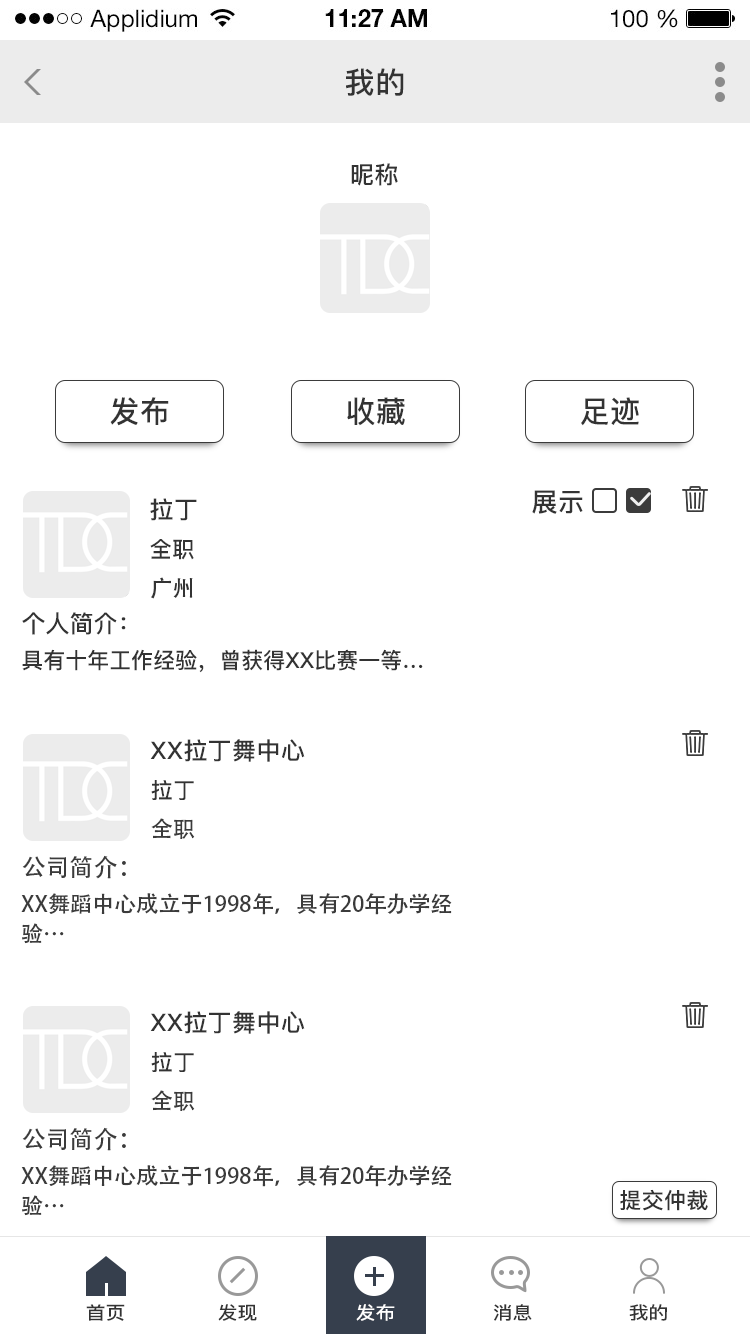
<style>
.page{position:relative;width:750px;height:1334px;background:#ffffff}
.page>*{position:absolute;margin:0}
.t1{font:30px "PingFang-SC-Bold";letter-spacing:0.02em;color:#333333;text-transform:uppercase}
.t2{font:24px "PingFang-SC-Bold";letter-spacing:0.02em;color:#333333;text-transform:uppercase}
.t3{font:26px "PingFang-SC-Bold";letter-spacing:0.02em;color:#333333;text-transform:uppercase}
.t4{font:22px "PingFang-SC-Bold";letter-spacing:0.02em;color:#333333;text-transform:uppercase}
.t5{font:22px "AdobeHeitiStd-Regular";letter-spacing:0.02em;color:#333333;text-transform:uppercase}
.t6{font:24px "PingFang-SC-Bold";color:#333333;text-transform:uppercase}
.t7{font:22px "PingFang-SC-Bold";color:#333333;text-transform:uppercase}
.t8{font:22px "AdobeHeitiStd-Regular";letter-spacing:0.02em;color:#3b3b3b;text-transform:uppercase}
.t9{font:24px "AdobeHeitiStd-Regular";color:#3b3b3b;text-transform:uppercase}
.t10{font:22px/29.7px "AdobeHeitiStd-Regular";color:#3b3b3b;text-transform:uppercase}
.t11{font:18px "PingFang-SC-Bold";color:#333333;scale:1.1 1}
.t12{font:18px "PingFang-SC-Bold";color:#ffffff;scale:1.1 1}
</style>
<div class="page">
<p class="t1" style="left:346px;top:68px;width:58px;height:28px">我的</p>
<p class="t2" style="left:351px;top:163px;width:47px;height:23px">昵称</p>
<p class="t1" style="left:110px;top:397px;width:59px;height:29px">发布</p>
<p class="t1" style="left:347px;top:397px;width:58px;height:29px">收藏</p>
<p class="t1" style="left:581px;top:397px;width:58px;height:29px">足迹</p>
<p class="t3" style="left:532px;top:490px;width:51px;height:24px">展示</p>
<p class="t2" style="left:150px;top:498px;width:47px;height:23px">拉丁</p>
<p class="t4" style="left:150px;top:539px;width:44px;height:21px">全职</p>
<p class="t5" style="left:151px;top:577px;width:42px;height:22px">广州</p>
<p class="t6" style="left:22px;top:612px;width:104px;height:23px">个人简介：</p>
<p class="t7" style="left:22px;top:649px;width:401px;height:24px">具有十年工作经验，曾获得xx比赛一等…</p>
<p class="t2" style="left:150px;top:739px;width:155px;height:23px">xx拉丁舞中心</p>
<p class="t4" style="left:151px;top:780px;width:43px;height:20px">拉丁</p>
<p class="t8" style="left:151px;top:818px;width:44px;height:21px">全职</p>
<p class="t9" style="left:22px;top:855px;width:104px;height:24px">公司简介：</p>
<p class="t10" style="left:21px;top:893px;width:431px;height:51px">xx舞蹈中心成立于1998年，具有20年办学经<br>验…</p>
<p class="t2" style="left:150px;top:1011px;width:155px;height:23px">xx拉丁舞中心</p>
<p class="t4" style="left:151px;top:1052px;width:43px;height:20px">拉丁</p>
<p class="t8" style="left:151px;top:1090px;width:44px;height:21px">全职</p>
<p class="t9" style="left:22px;top:1127px;width:104px;height:24px">公司简介：</p>
<p class="t10" style="left:21px;top:1165px;width:431px;height:51px">xx舞蹈中心成立于1998年，具有20年办学经<br>验…</p>
<p class="t4" style="left:620px;top:1189px;width:88px;height:22px">提交仲裁</p>
<p class="t11" style="left:86px;top:1304px;width:39px;height:17px">首页</p>
<p class="t11" style="left:218px;top:1304px;width:39px;height:17px">发现</p>
<p class="t12" style="left:356px;top:1304px;width:39px;height:17px">发布</p>
<p class="t11" style="left:493px;top:1304px;width:39px;height:17px">消息</p>
<p class="t11" style="left:629px;top:1304px;width:38px;height:17px">我的</p>
</div>
